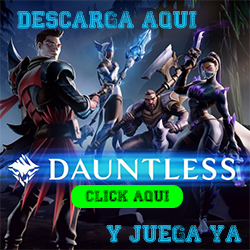
<style>
.page{position:relative;width:250px;height:250px}
.page>*{position:absolute;margin:0}
.t1{font:18px "Colleged";letter-spacing:0.002em;color:#16c3f5}
.t2{font:12px "Colleged";letter-spacing:0.002em;color:#000000}
</style>
<div class="page">
<p class="t1" style="left:17px;top:11px;width:180px;height:18px">Descarga aqui</p>
<p class="t2" style="left:85px;top:190px;width:84px;height:13px">Click aqui</p>
<p class="t1" style="left:106px;top:225px;width:136px;height:18px">Y juega ya</p>
</div>
